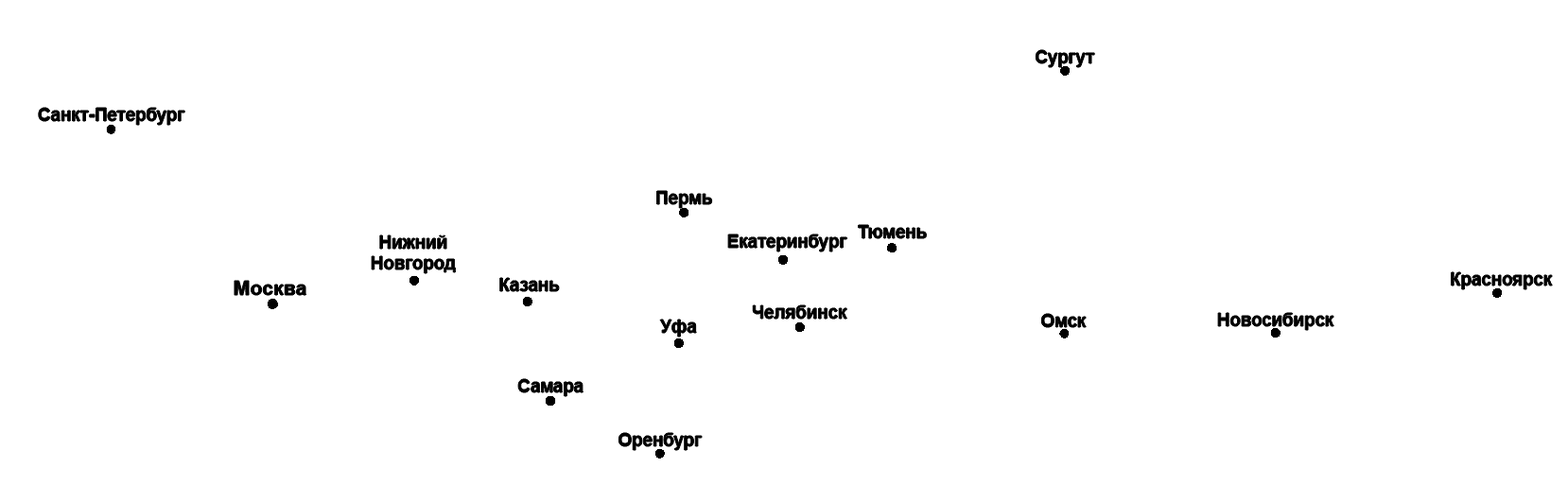
<style>
.page{position:relative;width:1568px;height:485px;background:#ffffff}
.page>*{position:absolute;margin:0}
.t1{font:17.7px "Arial-BoldMT";color:#000000}
.t2{font:20.2px "Arial-BoldMT";color:#000000}
</style>
<div class="page">
<p class="t1" style="left:1036px;top:50px;width:59px;height:17px">Сургут</p>
<p class="t1" style="left:38px;top:108px;width:147px;height:17px">Санкт-Петербург</p>
<p class="t1" style="left:656px;top:191px;width:56px;height:17px">Пермь</p>
<p class="t1" style="left:858px;top:225px;width:69px;height:13px">Тюмень</p>
<p class="t1" style="left:372px;top:235px;width:84px;height:38px;text-align:center">Нижний<br>Новгород</p>
<p class="t1" style="left:728px;top:235px;width:119px;height:17px">Екатеринбург</p>
<p class="t2" style="left:235px;top:281px;width:71px;height:14px">Москва</p>
<p class="t1" style="left:499px;top:278px;width:60px;height:13px">Казань</p>
<p class="t1" style="left:1451px;top:272px;width:102px;height:17px">Красноярск</p>
<p class="t1" style="left:753px;top:305px;width:94px;height:14px">Челябинск</p>
<p class="t1" style="left:1041px;top:314px;width:46px;height:13px">Омск</p>
<p class="t1" style="left:1218px;top:313px;width:116px;height:17px">Новосибирск</p>
<p class="t1" style="left:660px;top:320px;width:37px;height:17px">Уфа</p>
<p class="t1" style="left:518px;top:379px;width:66px;height:17px">Самара</p>
<p class="t1" style="left:618px;top:433px;width:84px;height:17px">Оренбург</p>
</div>
